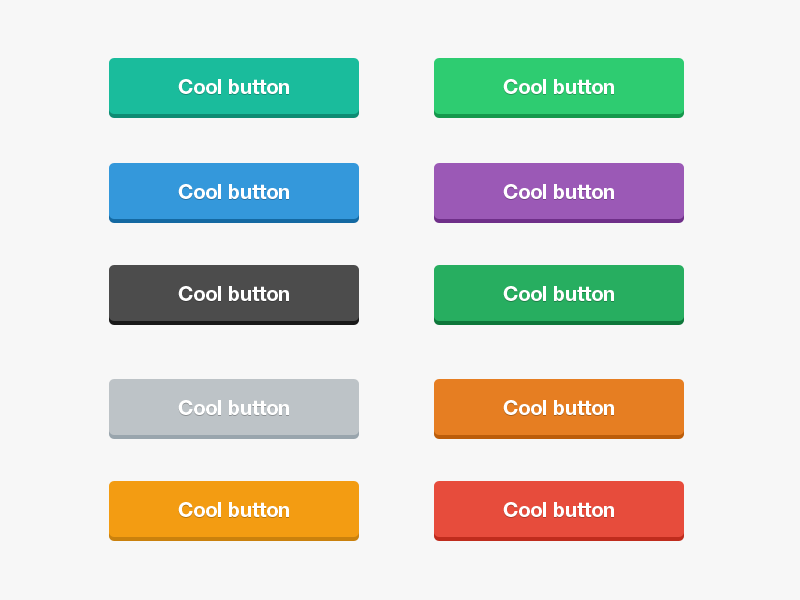
<style>
.page{position:relative;width:800px;height:600px;background:#f7f7f7}
.page>*{position:absolute;margin:0}
.t1{font:20.8px "HelveticaNeueLTStd-Bd";letter-spacing:-0.02em;color:#ffffff}
</style>
<div class="page">
<p class="t1" style="left:178px;top:79px;width:111px;height:15px">Cool button</p>
<p class="t1" style="left:503px;top:79px;width:111px;height:15px">Cool button</p>
<p class="t1" style="left:178px;top:184px;width:111px;height:15px">Cool button</p>
<p class="t1" style="left:503px;top:184px;width:111px;height:15px">Cool button</p>
<p class="t1" style="left:178px;top:286px;width:111px;height:15px">Cool button</p>
<p class="t1" style="left:503px;top:286px;width:111px;height:15px">Cool button</p>
<p class="t1" style="left:178px;top:400px;width:111px;height:15px">Cool button</p>
<p class="t1" style="left:503px;top:400px;width:111px;height:15px">Cool button</p>
<p class="t1" style="left:178px;top:502px;width:111px;height:15px">Cool button</p>
<p class="t1" style="left:503px;top:502px;width:111px;height:15px">Cool button</p>
</div>
